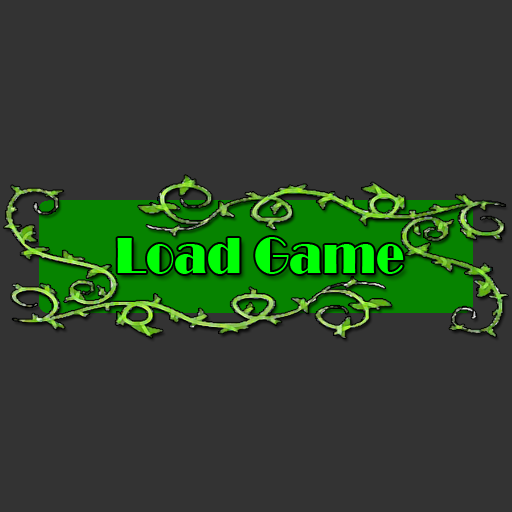
<style>
.page{position:relative;width:512px;height:512px;background:#333333}
.page>*{position:absolute;margin:0}
.t1{font:52.6px "Broadway";color:#00ff06;scale:0.89 1}
</style>
<div class="page">
<p class="t1" style="left:117px;top:237px;width:287px;height:37px">Load Game</p>
</div>
